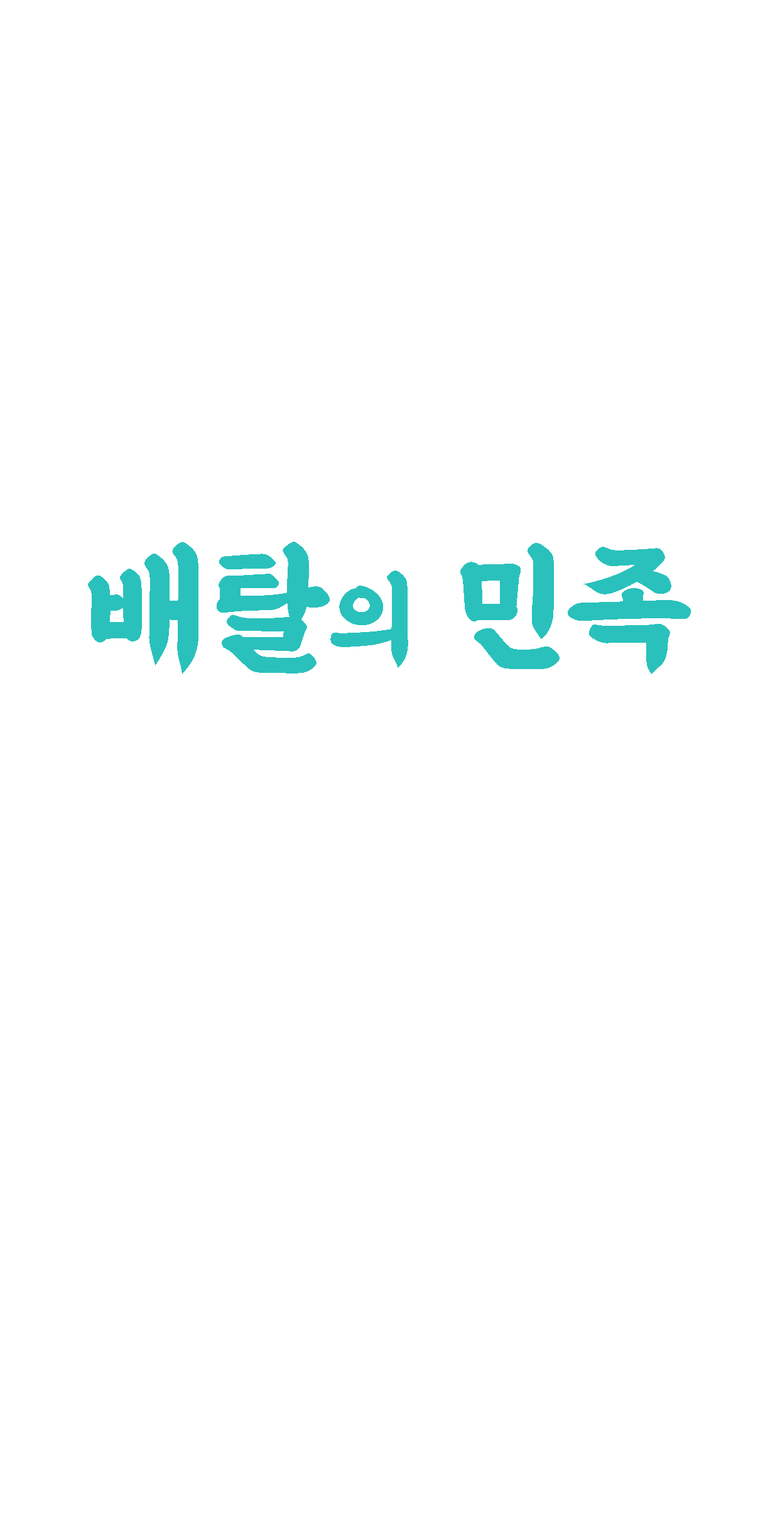
<style>
.page{position:relative;width:780px;height:1529px;background:#ffffff}
.page>*{position:absolute;margin:0}
.t1{font:144.4px "BMEULJIRO";color:#2ac1bc}
.t2{font:106.7px "BMEULJIRO";color:#2ac1bc}
</style>
<div class="page">
<p class="t1" style="left:88px;top:542px;width:603px;height:132px">배탈<span class="t2">의</span> 민족</p>
</div>
